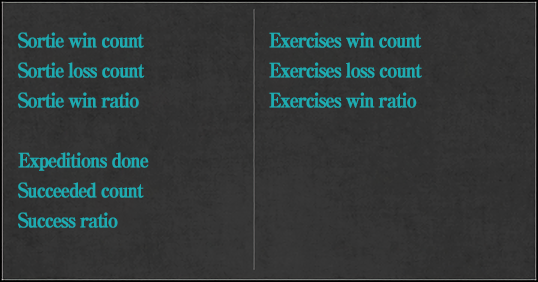
<style>
.page{position:relative;width:538px;height:282px}
.page>*{position:absolute;margin:0}
.t1{font:20px/30px "RyuminPro-ExBold";letter-spacing:-0.08em;color:#1dacb1;font-weight:bold;scale:0.9 1}
</style>
<div class="page">
<p class="t1" style="left:18px;top:32px;width:127px;height:76px">Sortie win count<br>Sortie loss count<br>Sortie win ratio</p>
<p class="t1" style="left:269px;top:32px;width:153px;height:76px">Exercises win count<br>Exercises loss count<br>Exercises win ratio</p>
<p class="t1" style="left:18px;top:152px;width:131px;height:76px">Expeditions done<br>Succeeded count<br>Success ratio</p>
</div>
